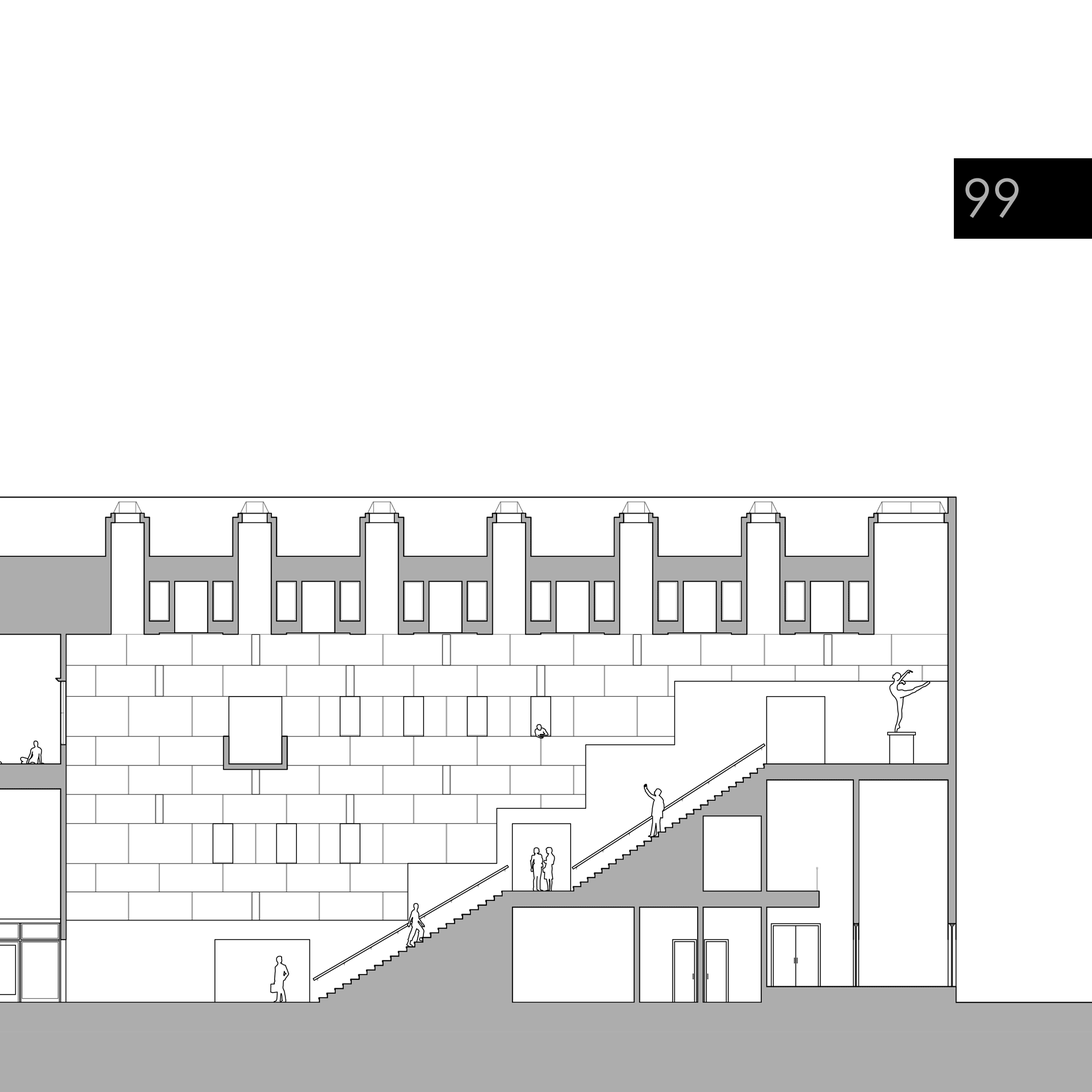
<style>
.page{position:relative;width:1092px;height:1092px;background:#ffffff}
.page>*{position:absolute;margin:0}
.t1{font:52.9px "CenturyGothic";color:#adadad}
</style>
<div class="page">
<p class="t1" style="left:965px;top:178px;width:54px;height:40px">99</p>
</div>
